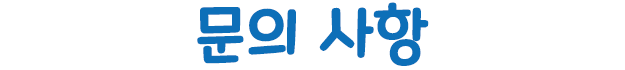
<style>
.page{position:relative;width:625px;height:70px;background:#ffffff}
.page>*{position:absolute;margin:0}
.t1{font:62.5px "MaplestoryLight";color:#0d6fb8;font-weight:bold;scale:0.97 1}
</style>
<div class="page">
<p class="t1" style="left:197px;top:2px;width:232px;height:64px">문의 사항</p>
</div>
